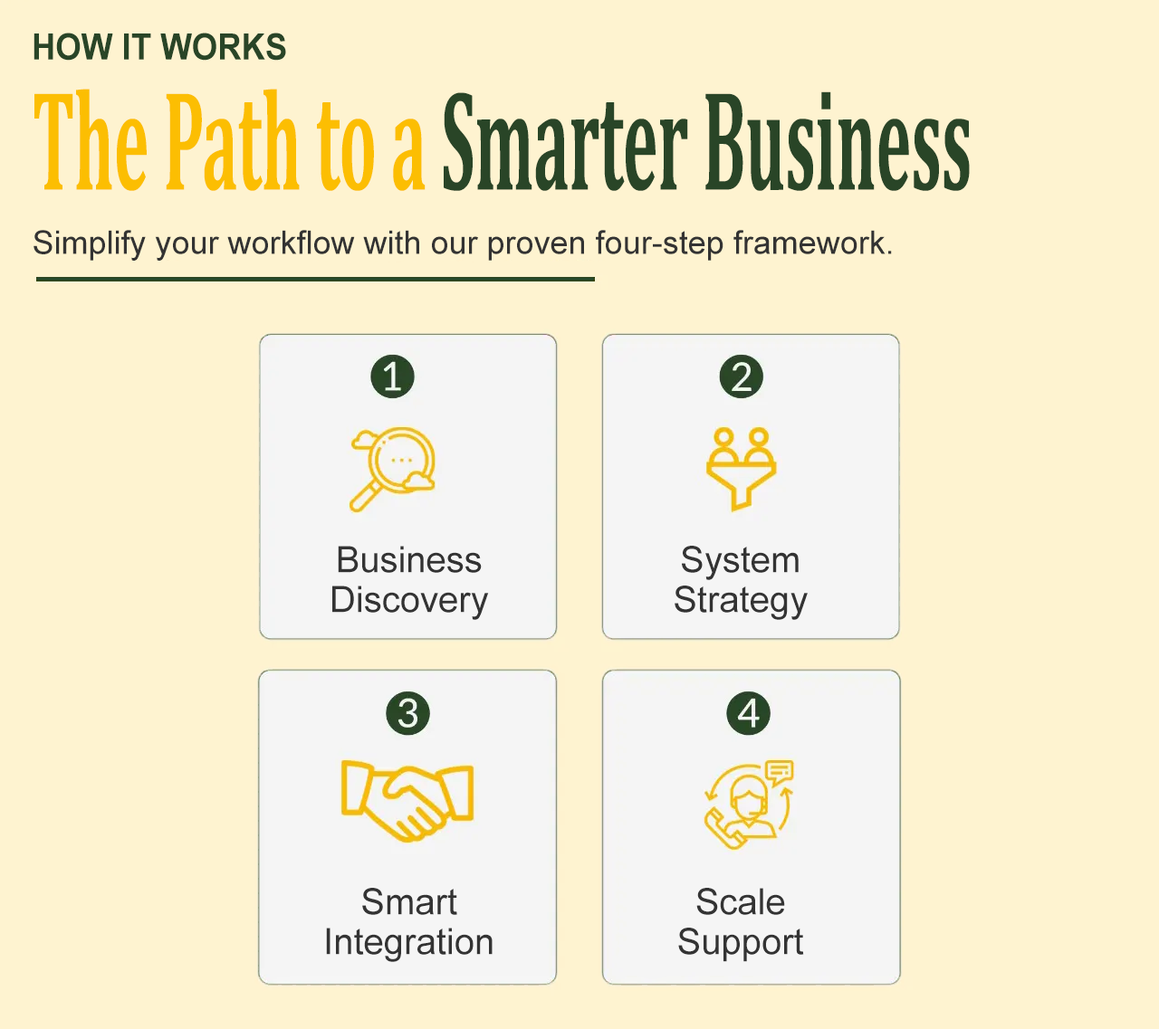
<style>
.page{position:relative;width:1159px;height:1029px;background:#fef3d0}
.page>*{position:absolute;margin:0}
.t1{font:36.2px "Arial-BoldMT";color:#294527;scale:0.91 1}
.t2{font:143.7px "Cambria-Bold";color:#294527;scale:0.46 1}
.t3{font:143.7px "Cambria-Bold";color:#fcbe02;scale:0.46 1}
.t4{font:32.6px "ArialMT";color:#333333}
.t5{font:36.2px/39.8px "ArialMT";color:#333333}
</style>
<div class="page">
<p class="t1" style="left:33px;top:33px;width:253px;height:28px">HOW IT WORKS</p>
<p class="t2" style="left:34px;top:89px;width:935px;height:102px"><span class="t3">The Path to a </span>Smarter Business</p>
<p class="t4" style="left:33px;top:230px;width:859px;height:31px">Simplify your workflow with our proven four-step framework.</p>
<p class="t5" style="left:332px;top:546px;width:157px;height:74px;text-align:center">Business<br>Discovery</p>
<p class="t5" style="left:674px;top:546px;width:133px;height:74px;text-align:center">System<br>Strategy</p>
<p class="t5" style="left:326px;top:888px;width:166px;height:74px;text-align:center">Smart<br>Integration</p>
<p class="t5" style="left:678px;top:888px;width:126px;height:74px;text-align:center">Scale<br>Support</p>
</div>
